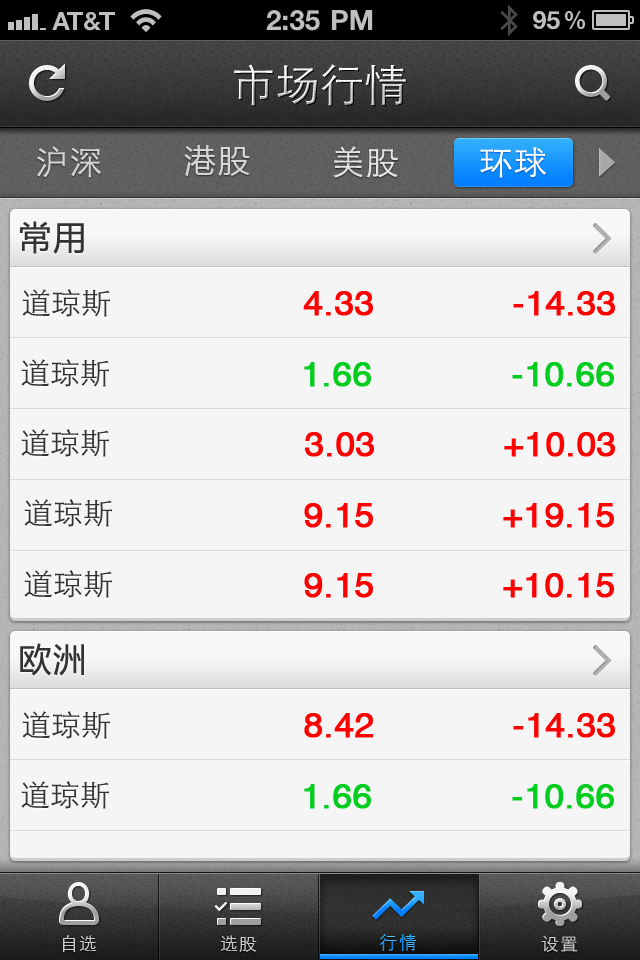
<style>
.page{position:relative;width:640px;height:960px;background:#f5f5f5}
.page>*{position:absolute;margin:0}
.t1{font:44px "STXihei";letter-spacing:0.005em}
.t2{font:33px "STXihei";letter-spacing:0.05em;color:#d6d6d6}
.t3{font:32px "MicrosoftYaHei";letter-spacing:0.05em;color:#d6d6d6}
.t4{font:33px "STXihei";letter-spacing:0.05em;color:#e3e3e3}
.t5{font:33px "STXihei";letter-spacing:0.05em;color:#ffffff}
.t6{font:33px "MicrosoftYaHei";letter-spacing:0.05em;color:#333333}
.t7{font:30px "STXihei";color:#333333}
.t8{font:35px "HelveticaCE-Regular";color:#ff0000;font-weight:bold}
.t9{font:35px "HelveticaCE-Regular";color:#00cd1d;font-weight:bold}
.t10{font:18px "STXihei";letter-spacing:0.05em;color:#cccccc}
.t11{font:18px "STXihei";letter-spacing:0.1em}
</style>
<div class="page">
<p class="t1" style="left:234px;top:64px;width:172px;height:42px">市场行情</p>
<p class="t2" style="left:37px;top:146px;width:64px;height:32px">沪深</p>
<p class="t3" style="left:184px;top:145px;width:66px;height:31px">港股</p>
<p class="t4" style="left:333px;top:146px;width:65px;height:32px">美股</p>
<p class="t5" style="left:480px;top:147px;width:66px;height:31px">环球</p>
<p class="t6" style="left:20px;top:221px;width:64px;height:33px">常用</p>
<p class="t7" style="left:22px;top:289px;width:88px;height:28px">道琼斯</p>
<p class="t8" style="left:303px;top:291px;width:70px;height:25px">4.33</p>
<p class="t8" style="left:513px;top:291px;width:102px;height:25px">-14.33</p>
<p class="t7" style="left:21px;top:359px;width:88px;height:28px">道琼斯</p>
<p class="t9" style="left:304px;top:362px;width:67px;height:25px">1.66</p>
<p class="t9" style="left:512px;top:362px;width:102px;height:25px">-10.66</p>
<p class="t7" style="left:21px;top:429px;width:88px;height:28px">道琼斯</p>
<p class="t8" style="left:304px;top:432px;width:70px;height:25px">3.03</p>
<p class="t8" style="left:504px;top:432px;width:111px;height:25px">+10.03</p>
<p class="t7" style="left:24px;top:499px;width:88px;height:28px">道琼斯</p>
<p class="t8" style="left:304px;top:503px;width:69px;height:25px">9.15</p>
<p class="t8" style="left:503px;top:503px;width:111px;height:25px">+19.15</p>
<p class="t7" style="left:24px;top:570px;width:88px;height:28px">道琼斯</p>
<p class="t8" style="left:304px;top:573px;width:69px;height:25px">9.15</p>
<p class="t8" style="left:503px;top:573px;width:111px;height:25px">+10.15</p>
<p class="t6" style="left:20px;top:643px;width:64px;height:33px">欧洲</p>
<p class="t7" style="left:22px;top:711px;width:88px;height:28px">道琼斯</p>
<p class="t8" style="left:304px;top:713px;width:69px;height:25px">8.42</p>
<p class="t8" style="left:513px;top:713px;width:102px;height:25px">-14.33</p>
<p class="t7" style="left:21px;top:781px;width:88px;height:28px">道琼斯</p>
<p class="t9" style="left:304px;top:784px;width:67px;height:25px">1.66</p>
<p class="t9" style="left:512px;top:784px;width:102px;height:25px">-10.66</p>
<p class="t10" style="left:62px;top:935px;width:35px;height:17px">自选</p>
<p class="t10" style="left:220px;top:935px;width:37px;height:17px">选股</p>
<p class="t11" style="left:379px;top:934px;width:38px;height:17px">行情</p>
<p class="t10" style="left:541px;top:935px;width:37px;height:17px">设置</p>
</div>
